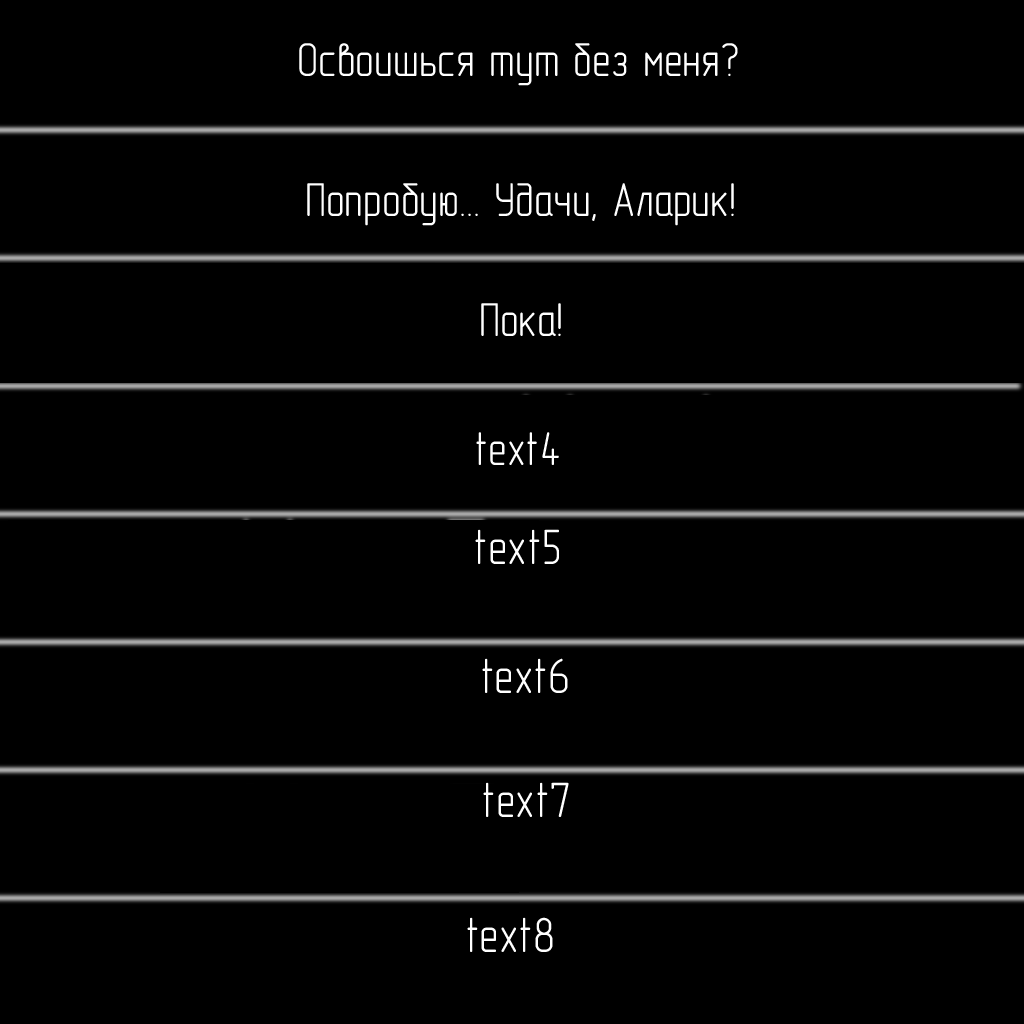
<style>
.page{position:relative;width:1024px;height:1024px;background:#000000}
.page>*{position:absolute;margin:0}
.t1{font:48px "GOST-2.304-81typeA";color:#ffffff}
.t2{font:50px "GOST-2.304-81typeA";color:#ffffff}
</style>
<div class="page">
<p class="t1" style="left:299px;top:43px;width:439px;height:43px">Освоишься тут без меня?</p>
<p class="t1" style="left:307px;top:183px;width:427px;height:43px">Попробую... Удачи, Аларик!</p>
<p class="t1" style="left:481px;top:303px;width:80px;height:33px">Пока!</p>
<p class="t1" style="left:476px;top:432px;width:83px;height:33px">text4</p>
<p class="t2" style="left:475px;top:529px;width:84px;height:35px">text5</p>
<p class="t2" style="left:482px;top:658px;width:86px;height:35px">text6</p>
<p class="t2" style="left:483px;top:782px;width:86px;height:35px">text7</p>
<p class="t2" style="left:467px;top:917px;width:86px;height:35px">text8</p>
</div>
